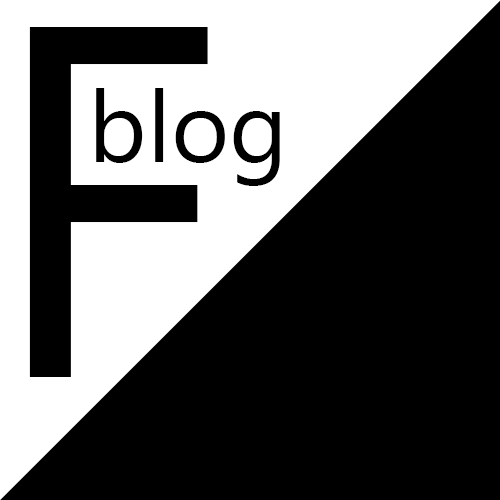
<style>
.page{position:relative;width:500px;height:500px;background:#000000}
.page>*{position:absolute;margin:0}
.t1{font:500px "SegoeUI";color:#000000}
.t2{font:100px "SegoeUI";color:#000000}
</style>
<div class="page">
<p class="t1" style="left:29px;top:27px;width:179px;height:350px">F</p>
<p class="t2" style="left:96px;top:88px;width:184px;height:98px">blog</p>
</div>
